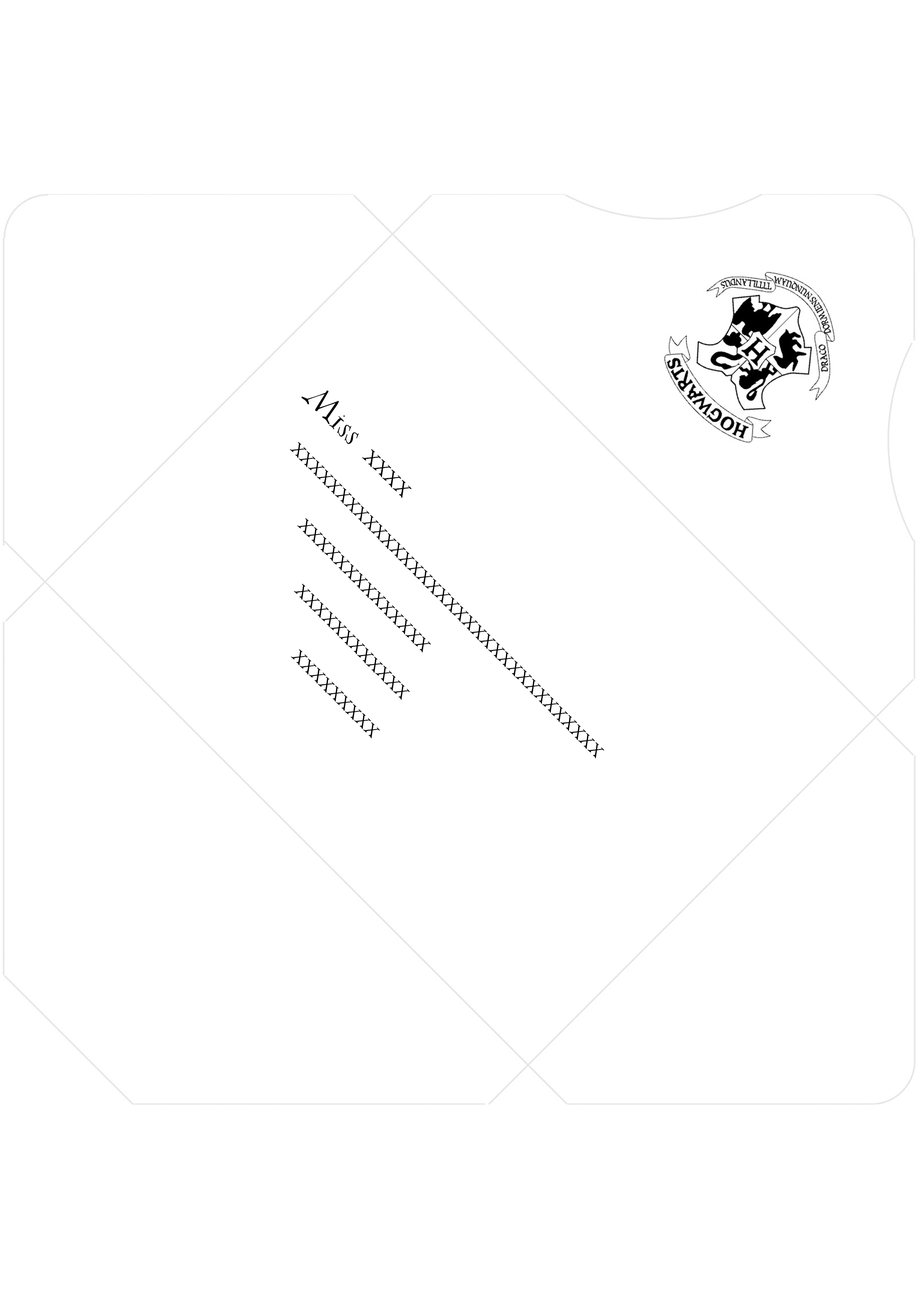
<style>
.page{position:relative;width:918px;height:1299px;background:#ffffff}
.page>*{position:absolute;margin:0}
.t1{font:24.7px/48.4px "4PrivetDrive-Regular";color:#000000}
.t2{font:26.2px/48.4px "4PrivetDrive-Regular";color:#000000}
.t3{font:27.8px/48.4px "4PrivetDrive-Regular";color:#000000}
</style>
<div class="page">
<p class="t1" style="left:290px;top:390px;width:314px;height:368px;rotate:45deg"><span class="t2"> </span><span class="t3">Miss xxxx<br></span>   xxxxxxxxxxxxxxxxxxxxxxxxxxxxxxxxxx<br>       xxxxxxxxxxxxxx<br>          xxxxxxxxxxxx<br>             xxxxxxxxx</p>
</div>
